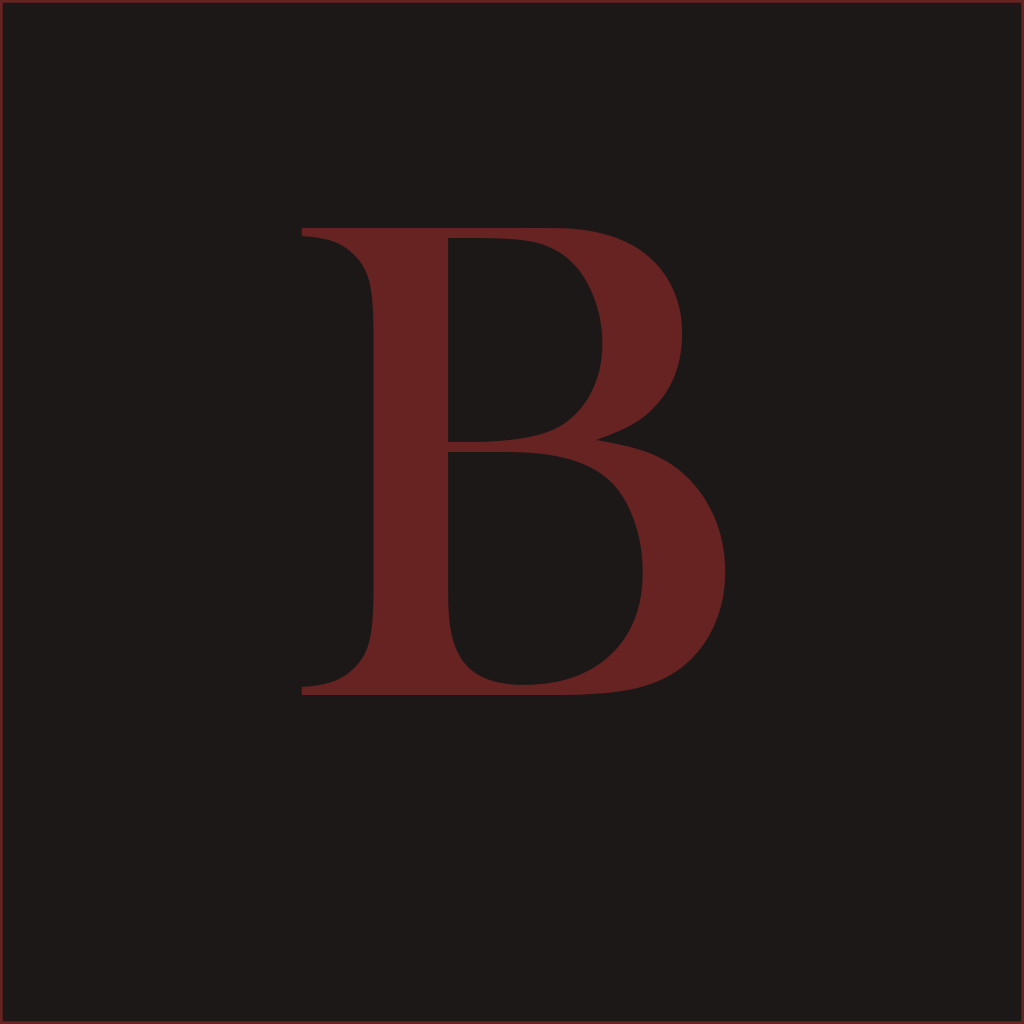
<style>
.page{position:relative;width:1024px;height:1024px;background:#1c1818}
.page>*{position:absolute;margin:0}
.t1{font:700px "BaskOldFace";color:#672222}
</style>
<div class="page">
<p class="t1" style="left:301px;top:227px;width:425px;height:468px">B</p>
</div>
